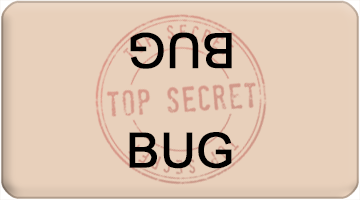
<style>
.page{position:relative;width:360px;height:200px;background:#e8d0bb}
.page>*{position:absolute;margin:0}
.t1{font:48px "ArialMT";color:#000000;font-weight:bold}
</style>
<div class="page">
<p class="t1" style="left:130px;top:32px;width:102px;height:37px;rotate:180deg">BUG</p>
<p class="t1" style="left:129px;top:132px;width:103px;height:37px">BUG</p>
</div>
